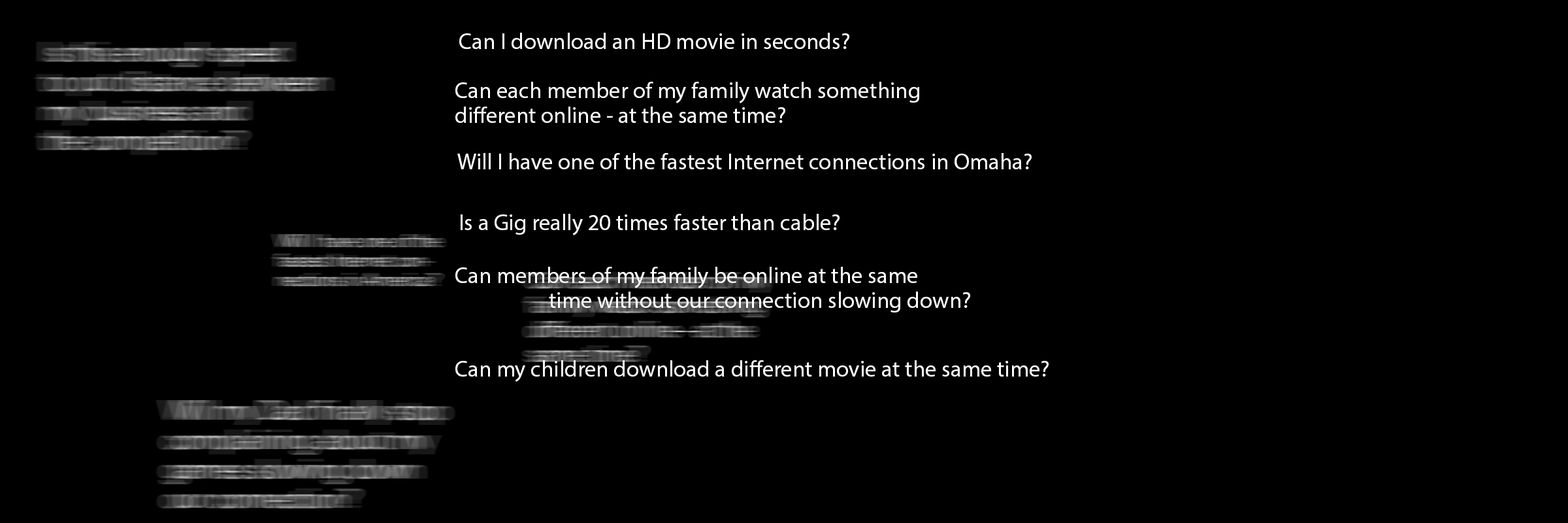
<style>
.page{position:relative;width:1568px;height:523px;background:#000000}
.page>*{position:absolute;margin:0}
.t1{font:22.9px "MyriadPro-Regular";color:#ffffff}
.t2{font:22.9px/24.8px "MyriadPro-Regular";color:#ffffff}
</style>
<div class="page">
<p class="t1" style="left:459px;top:33px;width:390px;height:16px">Can I download an HD movie in seconds?</p>
<p class="t2" style="left:455px;top:82px;width:464px;height:41px">Can each member of my family watch something<br>different online - at the same time?</p>
<p class="t1" style="left:457px;top:153px;width:575px;height:16px">Will I have one of the fastest Internet connections in Omaha?</p>
<p class="t1" style="left:461px;top:214px;width:379px;height:21px">Is a Gig really 20 times faster than cable?</p>
<p class="t2" style="left:455px;top:267px;width:515px;height:45px">Can members of my family be online at the same<br>    time without our connection slowing down?</p>
<p class="t1" style="left:455px;top:360px;width:594px;height:22px">Can my children download a different movie at the same time?</p>
</div>
